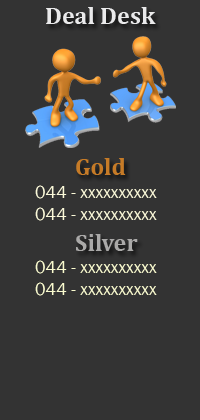
<style>
.page{position:relative;width:200px;height:420px;background:#333333}
.page>*{position:absolute;margin:0}
.t1{font:24px "Cambria-Bold";color:#eaeaeb}
.t2{font:24px "Cambria-Bold";color:#c67b27}
.t3{font:18px "FranklinGothic-Book";color:#fbf9d9}
.t4{font:24px "Cambria-Bold";color:#aaa9a8}
.t5{font:18px "FranklinGothic-Book";color:#fafbcf}
</style>
<div class="page">
<p class="t1" style="left:46px;top:7px;width:110px;height:17px">Deal Desk</p>
<p class="t2" style="left:76px;top:158px;width:50px;height:17px">Gold</p>
<p class="t3" style="left:35px;top:185px;width:122px;height:36px">044 - xxxxxxxxxx<br>044 - xxxxxxxxxx</p>
<p class="t4" style="left:76px;top:234px;width:62px;height:17px">Silver</p>
<p class="t5" style="left:35px;top:260px;width:122px;height:36px">044 - xxxxxxxxxx<br>044 - xxxxxxxxxx</p>
</div>
